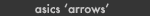
<style>
.page{position:relative;width:150px;height:16px;background:#353535}
.page>*{position:absolute;margin:0}
.t1{font:12px "Futura-Medium";color:#c6c5c5}
</style>
<div class="page">
<p class="t1" style="left:35px;top:3px;width:74px;height:11px">asics ‘arrows’</p>
</div>
